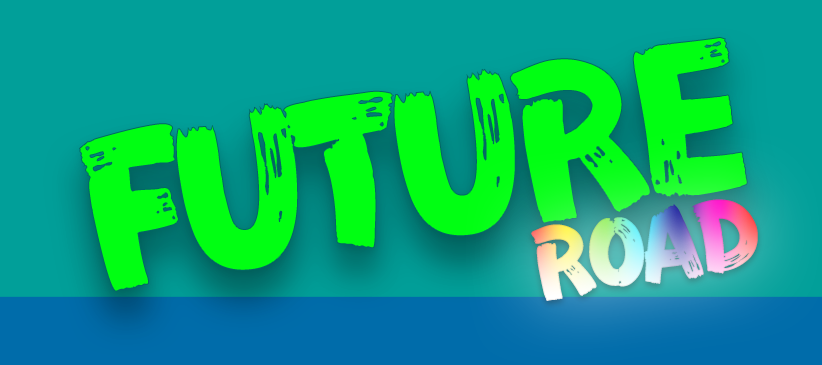
<style>
.page{position:relative;width:822px;height:365px;background:#019f99}
.page>*{position:absolute;margin:0}
.t1{font:194px "FZFENSTXJW--GB1-0";letter-spacing:-0.08em;color:#00ff12}
.t2{font:90px "FZFENSTXJW--GB1-0";letter-spacing:-0.08em}
</style>
<div class="page">
<p class="t1" style="left:79px;top:37px;width:669px;height:255px;rotate:-9deg">FUTURE</p>
<p class="t2" style="left:531px;top:199px;width:227px;height:102px;rotate:-9deg">ROAD</p>
</div>
